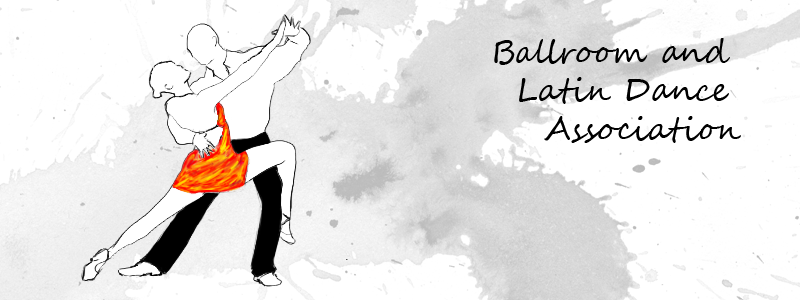
<style>
.page{position:relative;width:800px;height:300px;background:#ffffff}
.page>*{position:absolute;margin:0}
.t1{font:32px "SegoeScript";color:#000000}
</style>
<div class="page">
<p class="t1" style="left:494px;top:38px;width:247px;height:105px;text-align:right">Ballroom and <br>Latin Dance <br>Association</p>
</div>
